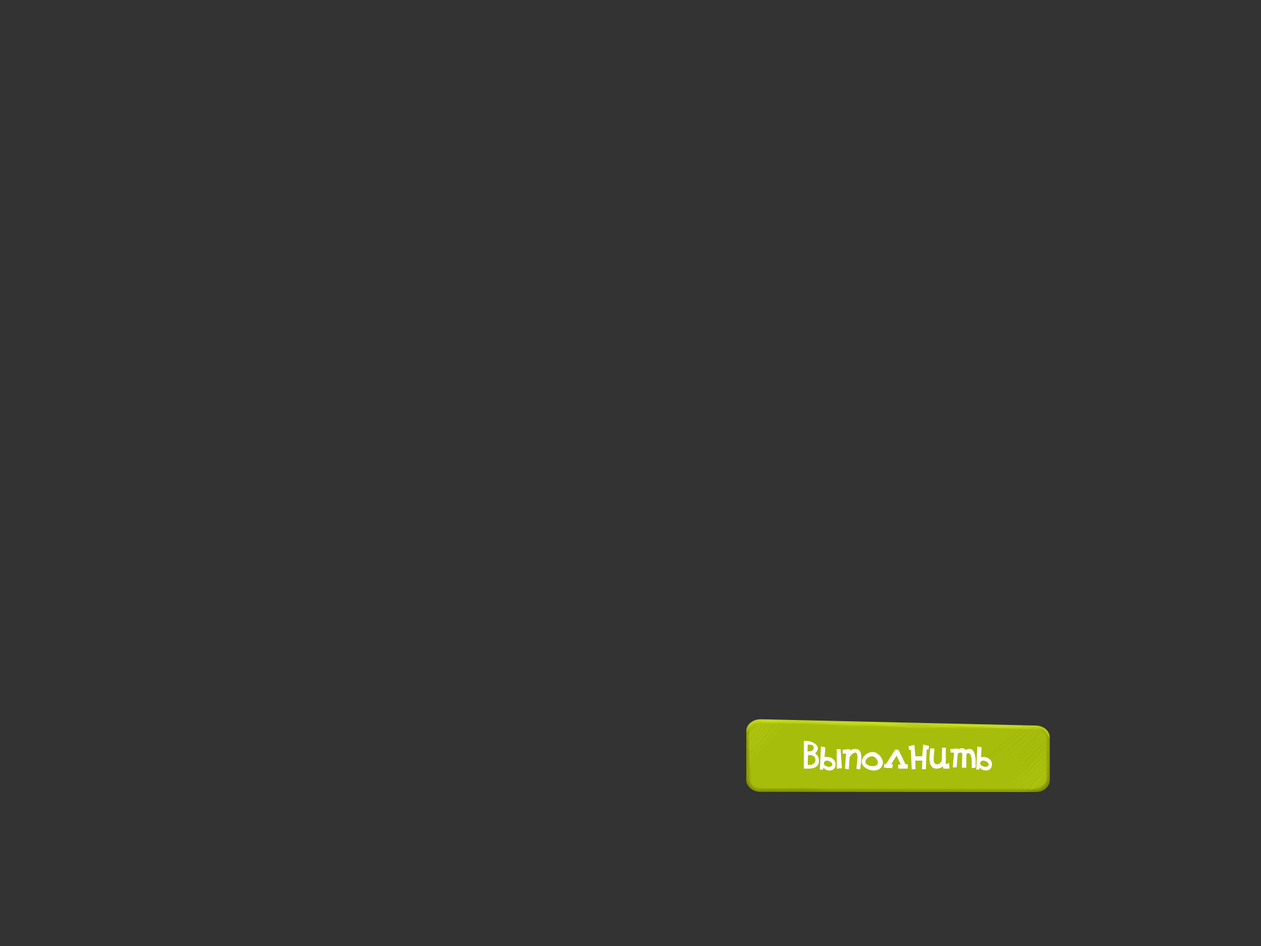
<style>
.page{position:relative;width:1261px;height:946px;background:#333333}
.page>*{position:absolute;margin:0}
.t1{font:38.2px "DSGoose";color:#ffffff}
</style>
<div class="page">
<p class="t1" style="left:803px;top:741px;width:189px;height:29px">Выполнить</p>
</div>
